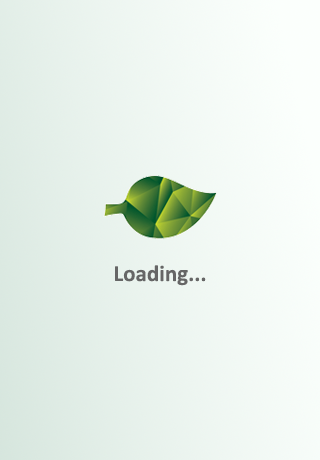
<style>
.page{position:relative;width:320px;height:460px}
.page>*{position:absolute;margin:0}
.t1{font:23px "Calibri-Bold";color:#666666}
</style>
<div class="page">
<p class="t1" style="left:115px;top:265px;width:91px;height:21px">Loading...</p>
</div>
